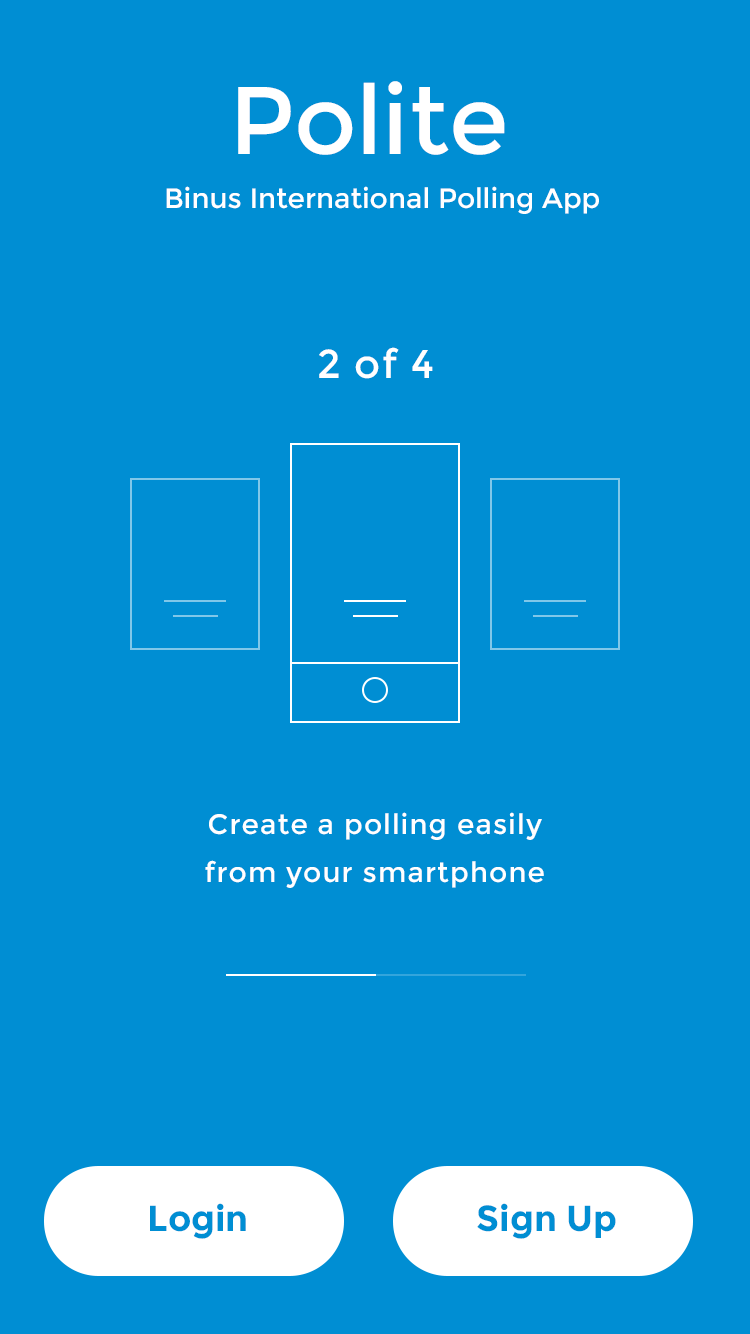
<style>
.page{position:relative;width:750px;height:1334px;background:#008ed3}
.page>*{position:absolute;margin:0}
.t1{font:96px "Montserrat-Regular";color:#ffffff}
.t2{font:28px "Montserrat-Regular";color:#ffffff}
.t3{font:40px "Montserrat-Regular";letter-spacing:0.04em;color:#ffffff}
.t4{font:28px/48px "Montserrat-Regular";letter-spacing:0.04em;color:#ffffff}
.t5{font:36px "Montserrat-Bold";color:#008ed3}
</style>
<div class="page">
<p class="t1" style="left:238px;top:81px;width:267px;height:74px">Polite</p>
<p class="t2" style="left:166px;top:186px;width:433px;height:28px">Binus International Polling App</p>
<p class="t3" style="left:319px;top:347px;width:114px;height:32px">2 of 4</p>
<p class="t4" style="left:205px;top:812px;width:339px;height:76px;text-align:center">Create a polling easily<br>from your smartphone</p>
<p class="t5" style="left:150px;top:1203px;width:96px;height:36px">Login</p>
<p class="t5" style="left:477px;top:1203px;width:139px;height:36px">Sign Up</p>
</div>
